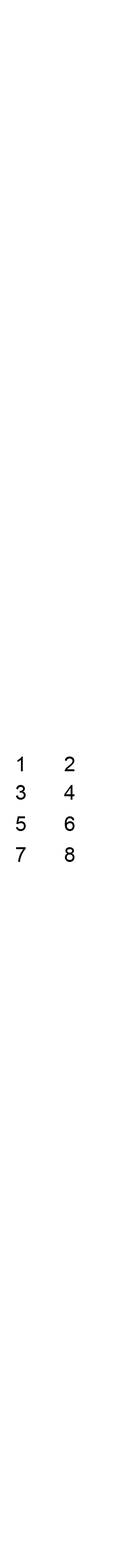
<style>
.page{position:relative;width:131px;height:1568px;background:#ffffff}
.page>*{position:absolute;margin:0}
.t1{font:20.4px "ArialMT";color:#000000}
</style>
<div class="page">
<p class="t1" style="left:17px;top:757px;width:6px;height:14px">1</p>
<p class="t1" style="left:65px;top:757px;width:10px;height:14px">2</p>
<p class="t1" style="left:16px;top:785px;width:10px;height:15px">3</p>
<p class="t1" style="left:64px;top:785px;width:11px;height:15px">4</p>
<p class="t1" style="left:16px;top:816px;width:10px;height:15px">5</p>
<p class="t1" style="left:65px;top:816px;width:10px;height:15px">6</p>
<p class="t1" style="left:16px;top:847px;width:10px;height:15px">7</p>
<p class="t1" style="left:65px;top:847px;width:10px;height:15px">8</p>
</div>
